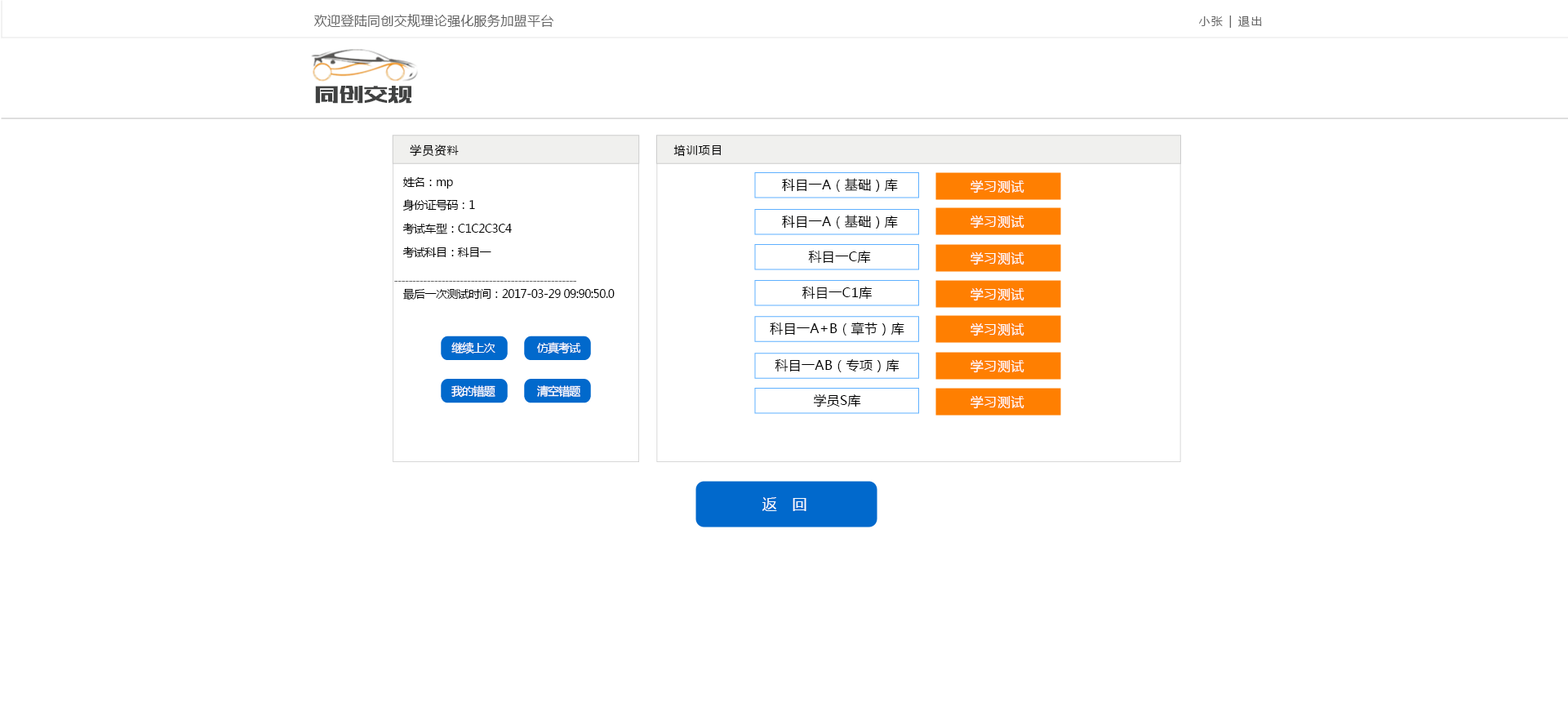
<style>
.page{position:relative;width:1568px;height:725px;background:#ffffff}
.page>*{position:absolute;margin:0}
.t1{font:13.1px "MicrosoftYaHei";letter-spacing:0.02em;color:#646464}
.t2{font:11.4px "MicrosoftYaHei";letter-spacing:0.12em;color:#646464}
.t3{font:23.3px "MFBanHei_Noncommercial-Regular";letter-spacing:0.055em;color:#404141;text-transform:uppercase}
.t4{font:11.4px "MicrosoftYaHei";letter-spacing:0.08em;color:#000000}
.t5{font:11.4px/23.5px "MicrosoftYaHei";letter-spacing:-0.04em;color:#000000}
.t6{font:13.1px "MicrosoftYaHei";letter-spacing:0.02em;color:#000000}
.t7{font:13.1px "MicrosoftYaHei";letter-spacing:0.04em;color:#ffffff}
.t8{font:9.8px "MicrosoftYaHei";letter-spacing:-0.06em;color:#666666}
.t9{font:11.4px "MicrosoftYaHei";letter-spacing:-0.04em;color:#000000}
.t10{font:11.4px "MicrosoftYaHei";letter-spacing:-0.06em;color:#ffffff}
.t11{font:14.7px "MicrosoftYaHei";letter-spacing:0.04em;color:#ffffff}
</style>
<div class="page">
<p class="t1" style="left:314px;top:14px;width:239px;height:14px">欢迎登陆同创交规理论强化服务加盟平台</p>
<p class="t2" style="left:1199px;top:16px;width:63px;height:12px">小张 | 退出</p>
<p class="t3" style="left:315px;top:86px;width:97px;height:18px">同创交规</p>
<p class="t4" style="left:410px;top:144px;width:49px;height:13px">学员资料</p>
<p class="t4" style="left:673px;top:144px;width:48px;height:13px">培训项目</p>
<p class="t5" style="left:402px;top:177px;width:110px;height:81px">姓名：mp<br>身份证号码：1<br>考试车型：C1C2C3C4<br>考试科目：科目一</p>
<p class="t6" style="left:782px;top:178px;width:116px;height:14px">科目一A（基础）库</p>
<p class="t7" style="left:971px;top:180px;width:53px;height:13px">学习测试</p>
<p class="t6" style="left:782px;top:215px;width:116px;height:14px">科目一A（基础）库</p>
<p class="t7" style="left:971px;top:215px;width:53px;height:14px">学习测试</p>
<p class="t6" style="left:808px;top:251px;width:63px;height:12px">科目一C库</p>
<p class="t7" style="left:971px;top:251px;width:53px;height:14px">学习测试</p>
<p class="t8" style="left:394px;top:281px;width:182px;height:1px">--------------------------------------------------</p>
<p class="t9" style="left:402px;top:288px;width:213px;height:12px">最后一次测试时间：2017-03-29 09:90:50.0</p>
<p class="t6" style="left:802px;top:287px;width:70px;height:12px">科目一C1库</p>
<p class="t7" style="left:971px;top:287px;width:53px;height:14px">学习测试</p>
<p class="t6" style="left:770px;top:322px;width:134px;height:13px">科目一A+B（章节）库</p>
<p class="t7" style="left:971px;top:322px;width:53px;height:14px">学习测试</p>
<p class="t10" style="left:451px;top:342px;width:44px;height:12px">继续上次</p>
<p class="t10" style="left:537px;top:342px;width:43px;height:11px">仿真考试</p>
<p class="t6" style="left:775px;top:359px;width:124px;height:13px">科目一AB（专项）库</p>
<p class="t7" style="left:971px;top:359px;width:53px;height:14px">学习测试</p>
<p class="t10" style="left:451px;top:385px;width:44px;height:13px">我的错题</p>
<p class="t10" style="left:537px;top:385px;width:43px;height:13px">清空错题</p>
<p class="t6" style="left:814px;top:393px;width:47px;height:14px">学员S库</p>
<p class="t7" style="left:971px;top:395px;width:53px;height:14px">学习测试</p>
<p class="t11" style="left:762px;top:497px;width:44px;height:14px">返   回</p>
</div>
